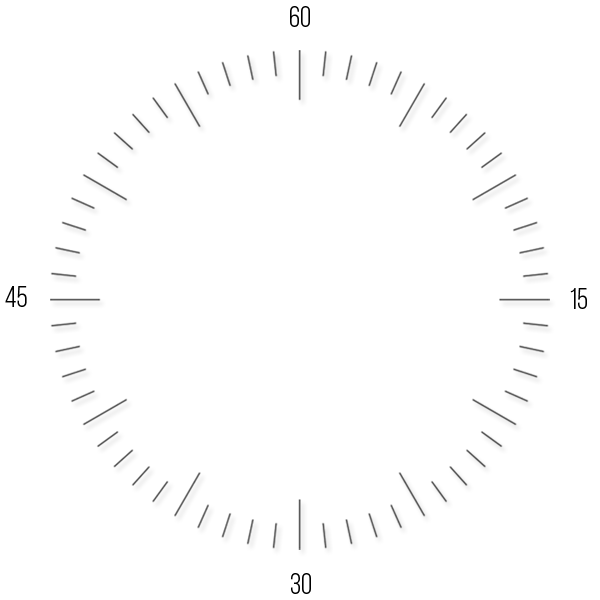
<style>
.page{position:relative;width:600px;height:600px;background:#ffffff}
.page>*{position:absolute;margin:0}
.t1{font:29.2px "BebasNeue-Book";color:#000000}
</style>
<div class="page">
<p class="t1" style="left:290px;top:6px;width:20px;height:21px">60</p>
<p class="t1" style="left:5px;top:286px;width:22px;height:21px">45</p>
<p class="t1" style="left:570px;top:288px;width:17px;height:21px">15</p>
<p class="t1" style="left:291px;top:573px;width:20px;height:21px">30</p>
</div>
